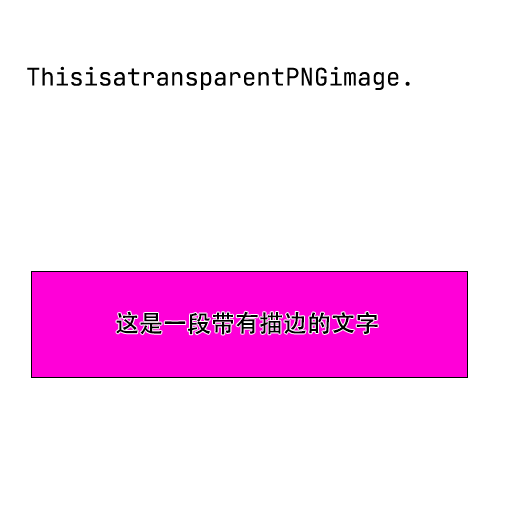
<style>
.page{position:relative;width:512px;height:512px;background:#ffffff}
.page>*{position:absolute;margin:0}
.t1{font:24px "JetBrainsMono-Light";color:#000000}
.t2{font:24px "AdobeHeitiStd-Regular";color:#000000}
</style>
<div class="page">
<p class="t1" style="left:27px;top:66px;width:383px;height:24px">ThisisatransparentPNGimage.</p>
<p class="t2" style="left:116px;top:311px;width:262px;height:24px">这是一段带有描边的文字</p>
</div>
